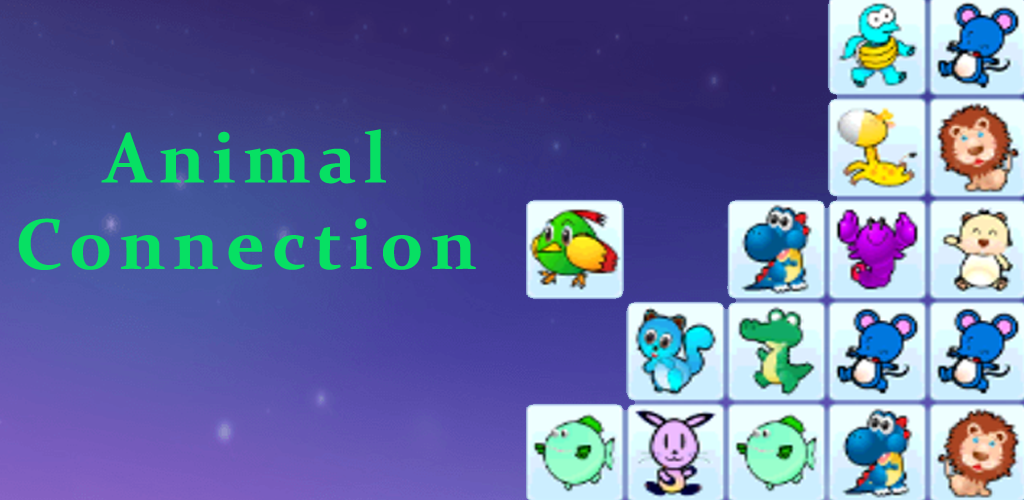
<style>
.page{position:relative;width:1024px;height:500px}
.page>*{position:absolute;margin:0}
.t1{font:72px "Constantia-Bold";letter-spacing:0.1em;color:#07e063}
</style>
<div class="page">
<p class="t1" style="left:18px;top:129px;width:458px;height:141px;text-align:center">Animal<br>Connection</p>
</div>
